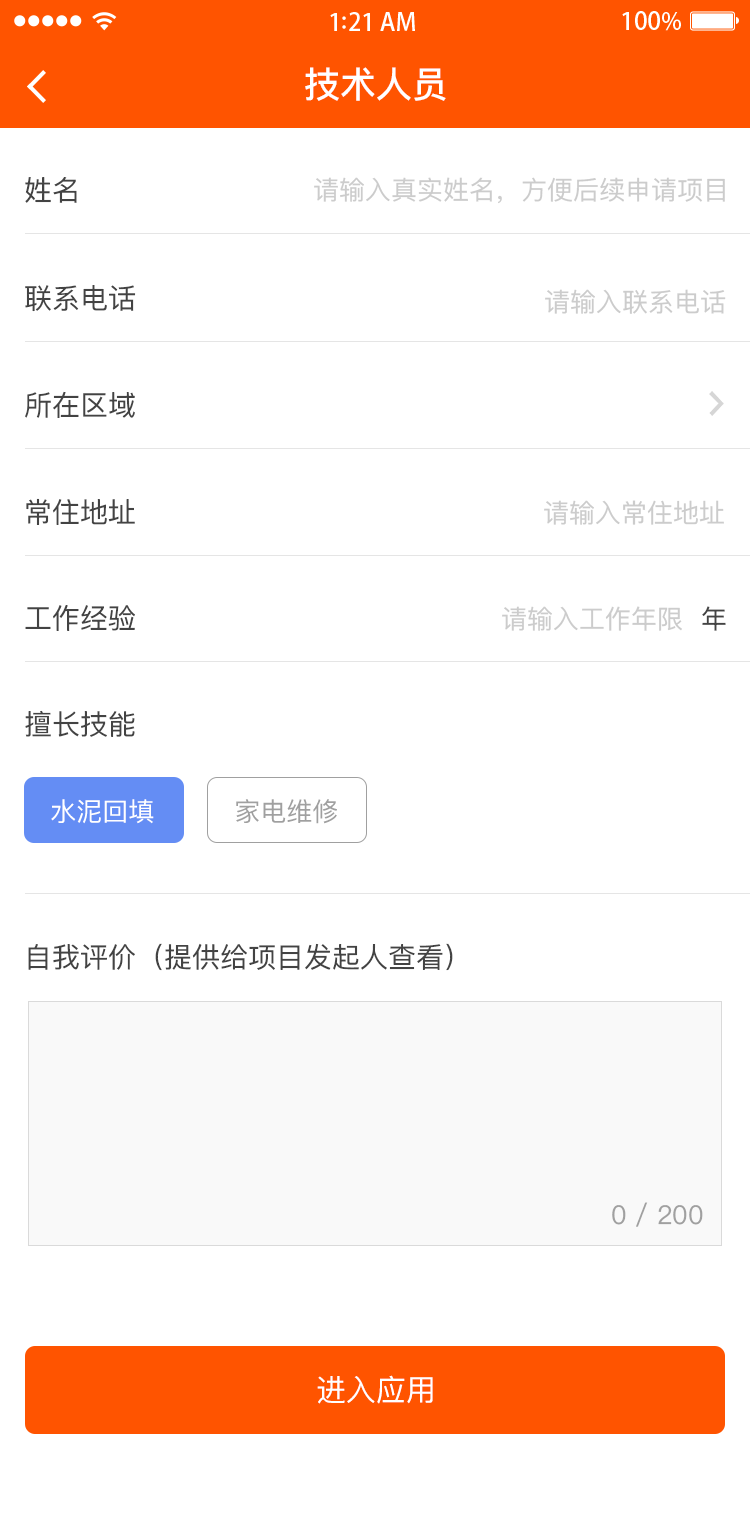
<style>
.page{position:relative;width:750px;height:1521px;background:#ffffff}
.page>*{position:absolute;margin:0}
.t1{font:36px "PingFangSC-Medium";color:#ffffff}
.t2{font:28px "PingFangSC-Regular";color:#434343}
.t3{font:26px "PingFangSC-Regular";color:#cccccc}
.t4{font:26px "PingFangSC-Regular";color:#434343}
.t5{font:26px "PingFangSC-Regular";color:#ffffff;text-transform:uppercase}
.t6{font:26px "PingFangSC-Regular";color:#a0a0a0;text-transform:uppercase}
.t7{font:26px "PingFangSC-Regular";color:#a0a0a0}
.t8{font:30px "PingFangSC-Regular";color:#ffffff;text-transform:uppercase}
</style>
<div class="page">
<p class="t1" style="left:305px;top:67px;width:141px;height:34px">技术人员</p>
<p class="t2" style="left:25px;top:177px;width:52px;height:26px">姓名</p>
<p class="t3" style="left:314px;top:177px;width:411px;height:27px">请输入真实姓名，方便后续申请项目</p>
<p class="t2" style="left:25px;top:285px;width:111px;height:27px">联系电话</p>
<p class="t3" style="left:545px;top:289px;width:181px;height:25px">请输入联系电话</p>
<p class="t2" style="left:25px;top:391px;width:110px;height:27px">所在区域</p>
<p class="t2" style="left:26px;top:498px;width:109px;height:27px">常住地址</p>
<p class="t3" style="left:544px;top:500px;width:180px;height:25px">请输入常住地址</p>
<p class="t2" style="left:25px;top:605px;width:110px;height:26px">工作经验</p>
<p class="t3" style="left:502px;top:606px;width:180px;height:25px">请输入工作年限</p>
<p class="t4" style="left:702px;top:606px;width:24px;height:25px">年</p>
<p class="t2" style="left:25px;top:710px;width:110px;height:27px">擅长技能</p>
<p class="t5" style="left:51px;top:799px;width:103px;height:25px">水泥回填</p>
<p class="t6" style="left:236px;top:799px;width:101px;height:25px">家电维修</p>
<p class="t2" style="left:28px;top:943px;width:425px;height:28px">自我评价（提供给项目发起人查看）</p>
<p class="t7" style="left:612px;top:1202px;width:91px;height:25px">0 / 200</p>
<p class="t8" style="left:317px;top:1375px;width:116px;height:29px">进入应用</p>
</div>
